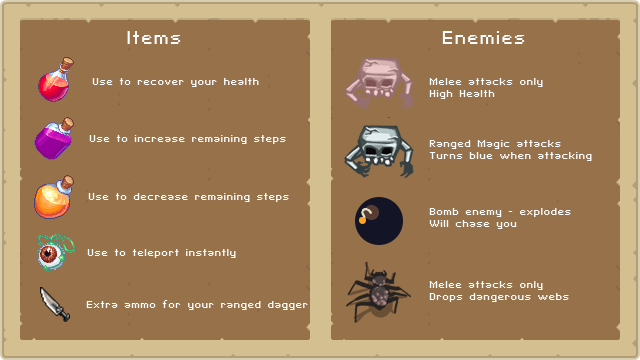
<style>
.page{position:relative;width:640px;height:360px;background:#97714a}
.page>*{position:absolute;margin:0}
.t1{font:18px "SFPixelate";color:#ffffff}
.t2{font:10px "SFPixelate";color:#ffffff}
</style>
<div class="page">
<p class="t1" style="left:127px;top:31px;width:54px;height:13px">Items</p>
<p class="t1" style="left:442px;top:31px;width:83px;height:13px">Enemies</p>
<p class="t2" style="left:92px;top:78px;width:167px;height:9px">Use to recover your health</p>
<p class="t2" style="left:429px;top:78px;width:114px;height:21px">Melee attacks only<br>High Health</p>
<p class="t2" style="left:89px;top:135px;width:197px;height:9px">Use to increase remaining steps</p>
<p class="t2" style="left:429px;top:140px;width:163px;height:21px">Ranged Magic attacks<br>Turns blue when attacking</p>
<p class="t2" style="left:88px;top:193px;width:201px;height:9px">Use to decrease remaining steps</p>
<p class="t2" style="left:429px;top:208px;width:142px;height:21px">Bomb enemy - explodes<br>Will chase you</p>
<p class="t2" style="left:87px;top:249px;width:149px;height:9px">Use to teleport instantly</p>
<p class="t2" style="left:429px;top:281px;width:140px;height:21px">Melee attacks only<br>Drops dangerous webs</p>
<p class="t2" style="left:86px;top:300px;width:222px;height:10px">Extra ammo for your ranged dagger</p>
</div>
